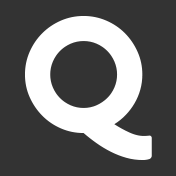
<style>
.page{position:relative;width:176px;height:176px;background:#333333}
.page>*{position:absolute;margin:0}
.t1{font:150px "Paralex-Regular2";color:#ffffff}
</style>
<div class="page">
<p class="t1" style="left:25px;top:16px;width:127px;height:144px">Q</p>
</div>
